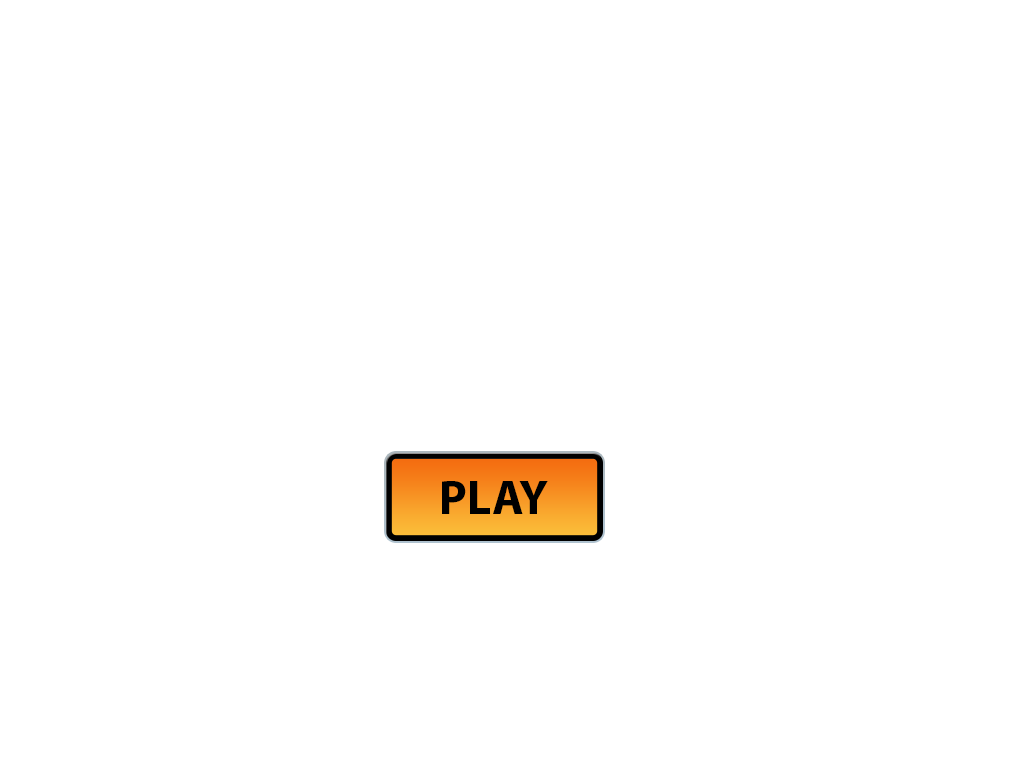
<style>
.page{position:relative;width:1024px;height:768px;background:#ffffff}
.page>*{position:absolute;margin:0}
.t1{font:48px "MyriadPro-Bold";color:#000000}
</style>
<div class="page">
<p class="t1" style="left:442px;top:481px;width:106px;height:33px">PLAY</p>
</div>
